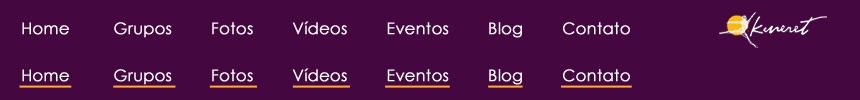
<style>
.page{position:relative;width:860px;height:100px;background:#440740}
.page>*{position:absolute;margin:0}
.t1{font:16px "CenturyGothic";color:#ffffff;font-weight:bold}
</style>
<div class="page">
<p class="t1" style="left:22px;top:21px;width:608px;height:17px">Home         Grupos        Fotos        Vídeos        Eventos        Blog        Contato</p>
<p class="t1" style="left:22px;top:68px;width:608px;height:17px">Home         Grupos        Fotos        Vídeos        Eventos        Blog        Contato</p>
</div>
